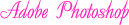
<style>
.page{position:relative;width:129px;height:25px;background:#ffffff}
.page>*{position:absolute;margin:0}
.t1{font:24px "UkrainianDecor";color:#fc24bc}
</style>
<div class="page">
<p class="t1" style="left:0px;top:0px;width:129px;height:25px">Adobe Photoshop</p>
</div>
